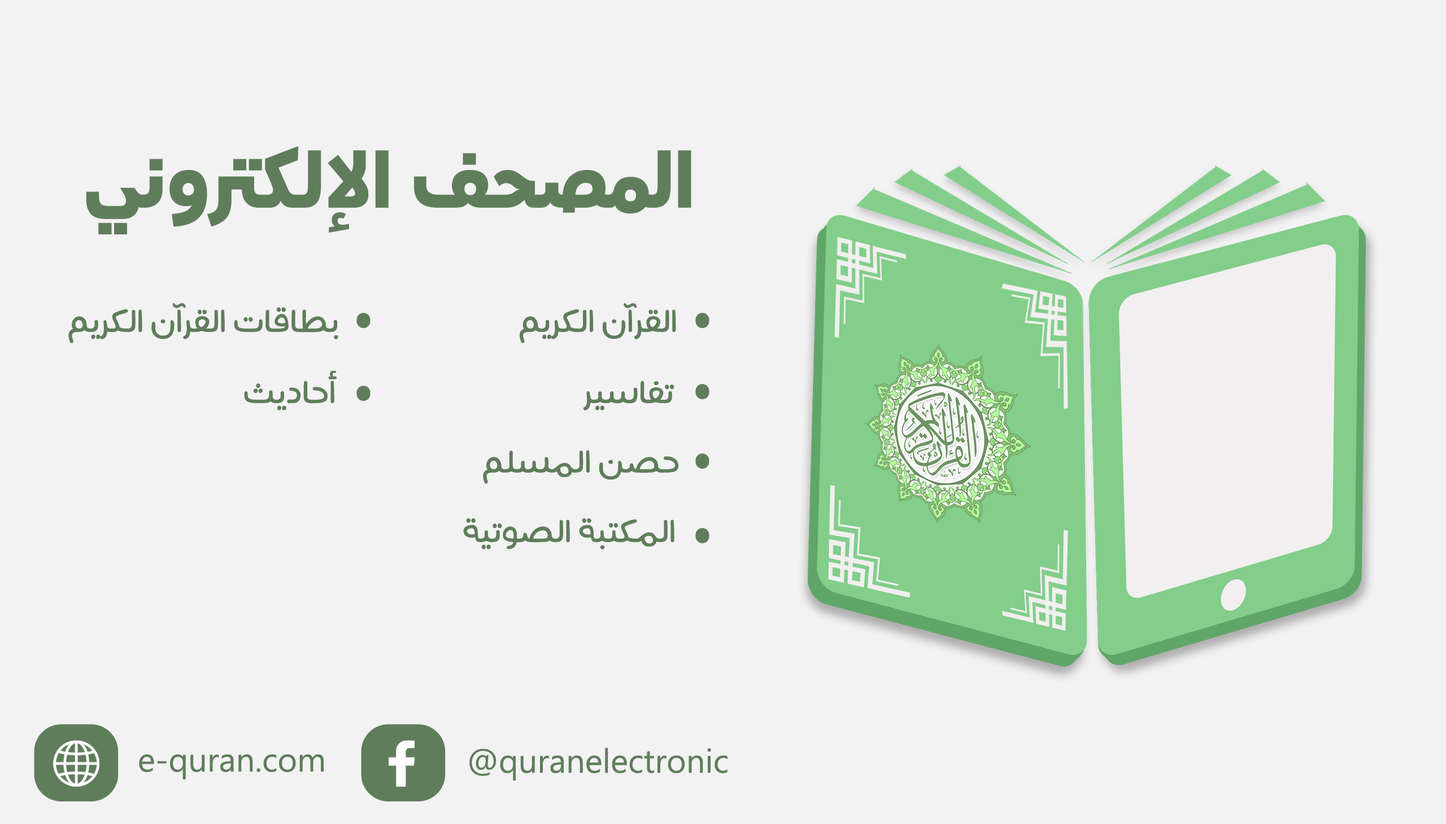
<style>
.page{position:relative;width:1446px;height:824px;background:#f2f2f2}
.page>*{position:absolute;margin:0}
.t1{font:80.4px "DINArabic-Black";color:#5f7d5b}
.t2{font:46.9px "FFHekaya-Light";color:#5f7d5b}
.t3{font:33.5px "Gadugi";color:#5f7d5b}
</style>
<div class="page">
<p class="t1" style="left:86px;top:146px;width:606px;height:88px">المصحف الإلكتروني</p>
<p class="t2" style="left:68px;top:303px;width:270px;height:41px">بطاقات القرآن الكريم</p>
<p class="t2" style="left:520px;top:303px;width:156px;height:41px">القرآن الكريم</p>
<p class="t2" style="left:244px;top:371px;width:93px;height:40px">أحاديث</p>
<p class="t2" style="left:583px;top:381px;width:92px;height:30px">تفاسير</p>
<p class="t2" style="left:483px;top:450px;width:196px;height:34px">حصن المسلم</p>
<p class="t2" style="left:463px;top:518px;width:212px;height:32px">المكتبة الصوتية</p>
<p class="t3" style="left:470px;top:748px;width:258px;height:33px">@quranelectronic</p>
<p class="t3" style="left:139px;top:754px;width:185px;height:26px">e-quran.com</p>
</div>
